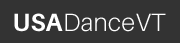
<style>
.page{position:relative;width:180px;height:43px;background:#333333}
.page>*{position:absolute;margin:0}
.t1{font:25px "Aileron-Light";letter-spacing:0.01em;color:#ffffff}
.t2{font:25px "Aileron-Bold";letter-spacing:0.01em;color:#ffffff}
</style>
<div class="page">
<p class="t1" style="left:14px;top:13px;width:152px;height:19px"><span class="t2">USA</span>DanceVT</p>
</div>
